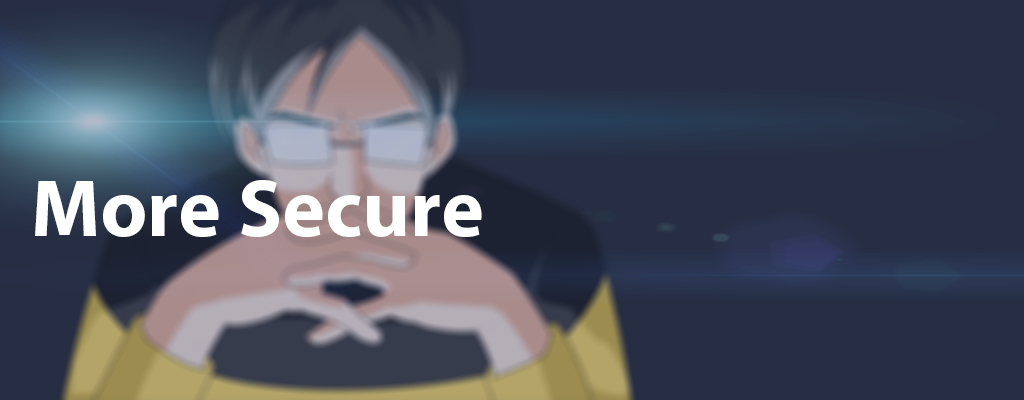
<style>
.page{position:relative;width:1024px;height:400px;background:#272e43}
.page>*{position:absolute;margin:0}
.t1{font:81.9px "MyriadPro-Bold";color:#ffffff}
</style>
<div class="page">
<p class="t1" style="left:35px;top:180px;width:447px;height:57px">More Secure</p>
</div>
